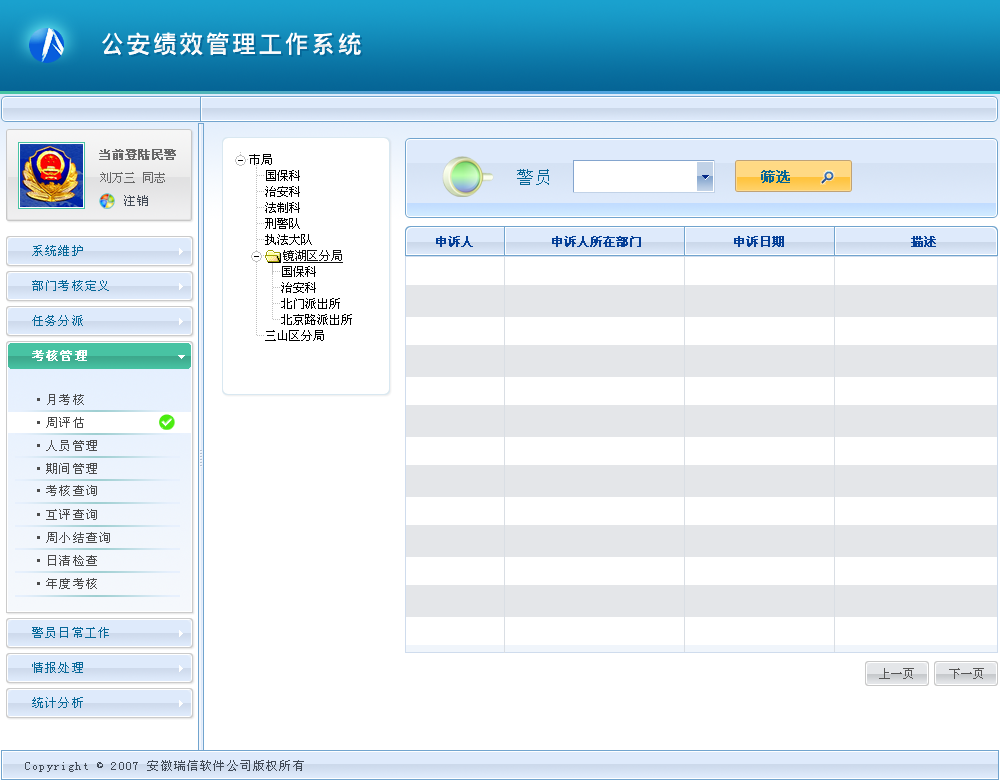
<style>
.page{position:relative;width:1000px;height:780px;background:#ffffff}
.page>*{position:absolute;margin:0}
.t1{font:12px "SimSun";color:#676767;font-weight:bold}
.t2{font:12px "SimSun";color:#676767}
.t3{font:18px "SimSun";color:#056696}
.t4{font:14px "SimSun";color:#056596;font-weight:bold}
.t5{font:12px "SimSun";letter-spacing:0.1em;color:#414a56}
.t6{font:12px "SimSun";letter-spacing:0.1em;color:#076899}
.t7{font:12px "SimSun";color:#053f97;font-weight:bold}
.t8{font:12px "SimSun";letter-spacing:0.1em;color:#ffffff;font-weight:bold}
.t9{font:12px "SimSun";letter-spacing:0.1em;color:#4c4c4c}
.t10{font:12px "SimSun";color:#565656}
</style>
<div class="page">
<p class="t1" style="left:99px;top:149px;width:77px;height:11px">当前登陆民警</p>
<p class="t2" style="left:100px;top:172px;width:65px;height:11px">刘万三 同志</p>
<p class="t3" style="left:517px;top:169px;width:32px;height:16px">警员</p>
<p class="t4" style="left:761px;top:170px;width:29px;height:13px">筛选</p>
<p class="t5" style="left:124px;top:195px;width:24px;height:11px">注销</p>
<p class="t6" style="left:32px;top:245px;width:51px;height:11px">系统维护</p>
<p class="t7" style="left:436px;top:236px;width:500px;height:11px">申诉人           申诉人所在部门             申诉日期                  描述</p>
<p class="t6" style="left:32px;top:280px;width:77px;height:11px">部门考核定义</p>
<p class="t6" style="left:32px;top:315px;width:51px;height:11px">任务分派</p>
<p class="t8" style="left:32px;top:350px;width:55px;height:11px">考核管理</p>
<p class="t9" style="left:37px;top:394px;width:47px;height:11px">·月考核</p>
<p class="t9" style="left:37px;top:417px;width:47px;height:11px">·周评估</p>
<p class="t9" style="left:37px;top:440px;width:60px;height:11px">·人员管理</p>
<p class="t9" style="left:37px;top:463px;width:60px;height:11px">·期间管理</p>
<p class="t9" style="left:37px;top:485px;width:60px;height:11px">·考核查询</p>
<p class="t9" style="left:37px;top:509px;width:60px;height:11px">·互评查询</p>
<p class="t9" style="left:37px;top:532px;width:73px;height:11px">·周小结查询</p>
<p class="t9" style="left:37px;top:555px;width:60px;height:11px">·日清检查</p>
<p class="t9" style="left:37px;top:578px;width:60px;height:11px">·年度考核</p>
<p class="t6" style="left:32px;top:627px;width:77px;height:11px">警员日常工作</p>
<p class="t6" style="left:32px;top:662px;width:51px;height:11px">情报处理</p>
<p class="t10" style="left:879px;top:668px;width:35px;height:11px">上一页</p>
<p class="t10" style="left:949px;top:668px;width:35px;height:11px">下一页</p>
<p class="t6" style="left:32px;top:697px;width:51px;height:11px">统计分析</p>
<p class="t5" style="left:25px;top:760px;width:279px;height:12px">Copyright © 2007 安徽瑞信软件公司版权所有</p>
</div>
